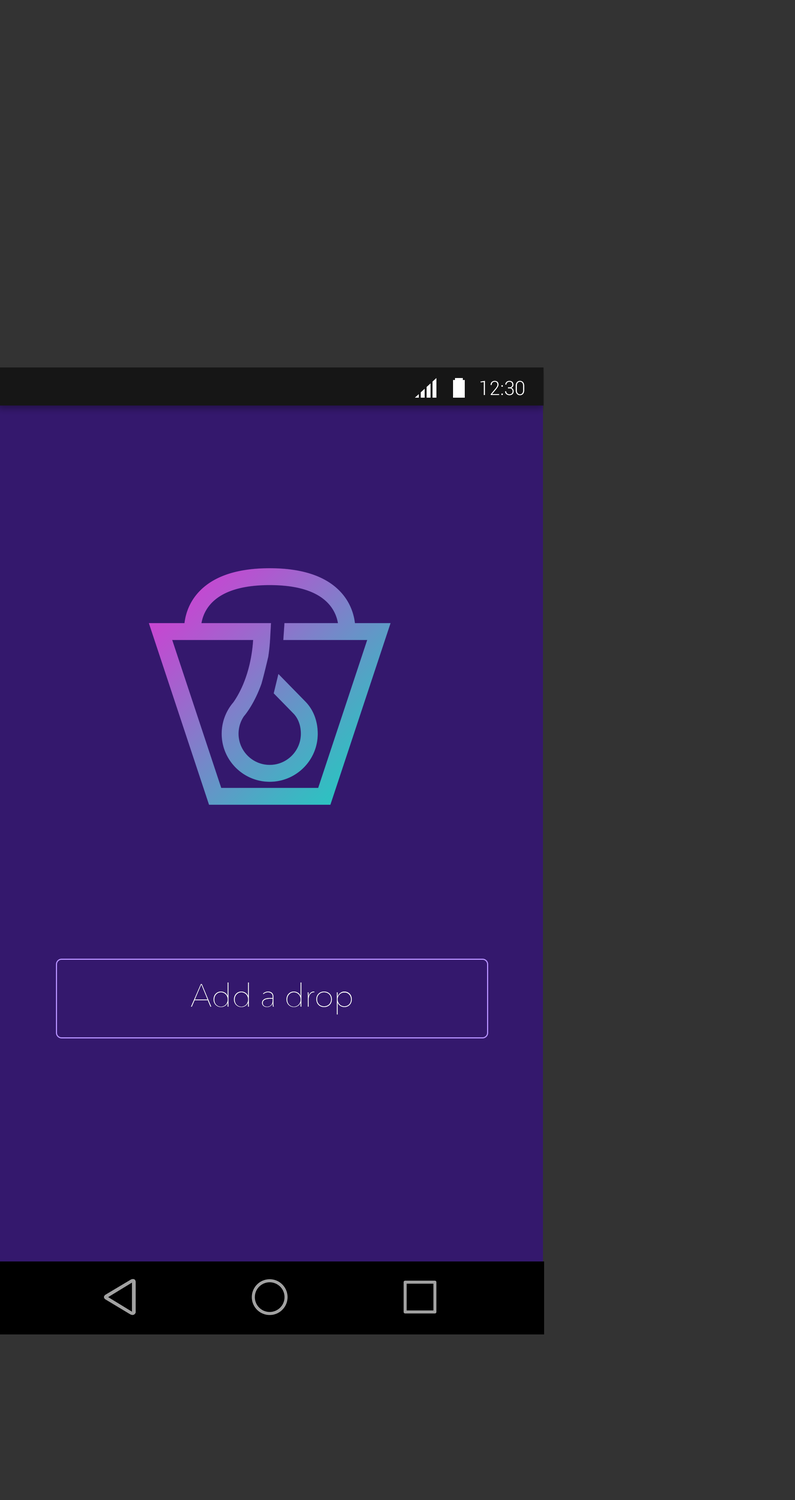
<style>
.page{position:relative;width:795px;height:1500px;background:#333333}
.page>*{position:absolute;margin:0}
.t1{font:19.1px "Roboto-Light";color:#ffffff}
.t2{font:32.1px "AvenirNext-UltraLight";color:#ffffff}
</style>
<div class="page">
<p class="t1" style="left:480px;top:381px;width:45px;height:14px">12:30</p>
<p class="t2" style="left:191px;top:982px;width:161px;height:32px">Add a drop</p>
</div>
